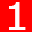
<style>
.page{position:relative;width:32px;height:32px;background:#ff0000}
.page>*{position:absolute;margin:0}
.t1{font:37.7px "Tahoma";color:#fffdfd;scale:1.21 1}
</style>
<div class="page">
<p class="t1" style="left:9px;top:2px;width:17px;height:28px">1</p>
</div>
